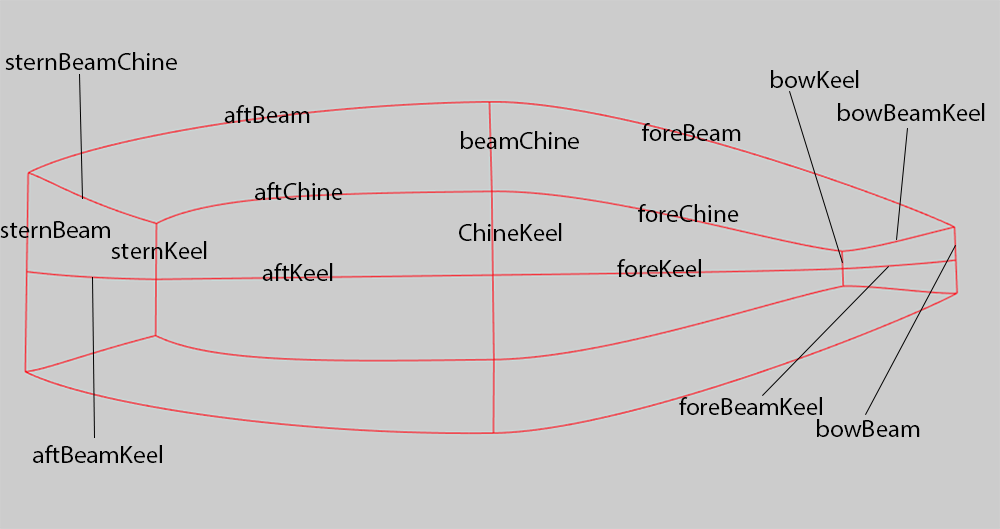
<style>
.page{position:relative;width:1000px;height:529px;background:#cccccc}
.page>*{position:absolute;margin:0}
.t1{font:25px "MyriadPro-Regular";color:#000000}
</style>
<div class="page">
<p class="t1" style="left:5px;top:52px;width:172px;height:18px">sternBeamChine</p>
<p class="t1" style="left:771px;top:70px;width:88px;height:18px">bowKeel</p>
<p class="t1" style="left:224px;top:105px;width:86px;height:18px">aftBeam</p>
<p class="t1" style="left:838px;top:103px;width:147px;height:18px">bowBeamKeel</p>
<p class="t1" style="left:642px;top:123px;width:99px;height:18px">foreBeam</p>
<p class="t1" style="left:461px;top:131px;width:118px;height:18px">beamChine</p>
<p class="t1" style="left:255px;top:182px;width:88px;height:18px">aftChine</p>
<p class="t1" style="left:638px;top:204px;width:101px;height:18px">foreChine</p>
<p class="t1" style="left:0px;top:221px;width:110px;height:17px">sternBeam</p>
<p class="t1" style="left:459px;top:223px;width:103px;height:18px">ChineKeel</p>
<p class="t1" style="left:111px;top:241px;width:96px;height:18px">sternKeel</p>
<p class="t1" style="left:262px;top:263px;width:71px;height:18px">aftKeel</p>
<p class="t1" style="left:617px;top:259px;width:84px;height:18px">foreKeel</p>
<p class="t1" style="left:679px;top:397px;width:143px;height:18px">foreBeamKeel</p>
<p class="t1" style="left:817px;top:419px;width:103px;height:18px">bowBeam</p>
<p class="t1" style="left:33px;top:445px;width:129px;height:18px">aftBeamKeel</p>
</div>
